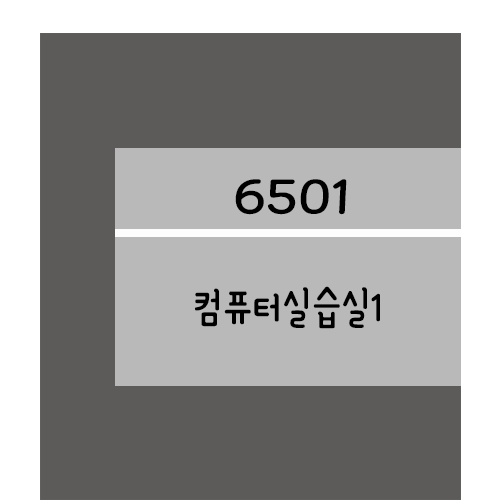
<style>
.page{position:relative;width:500px;height:500px;background:#5d5a5a}
.page>*{position:absolute;margin:0}
.t1{font:61.2px "YanoljaYacheR";color:#000000;scale:1.18 1}
.t2{font:48px "YanoljaYacheR";color:#000000}
</style>
<div class="page">
<p class="t1" style="left:235px;top:179px;width:112px;height:36px">6501</p>
<p class="t2" style="left:195px;top:286px;width:185px;height:43px">컴퓨터실습실1</p>
</div>
